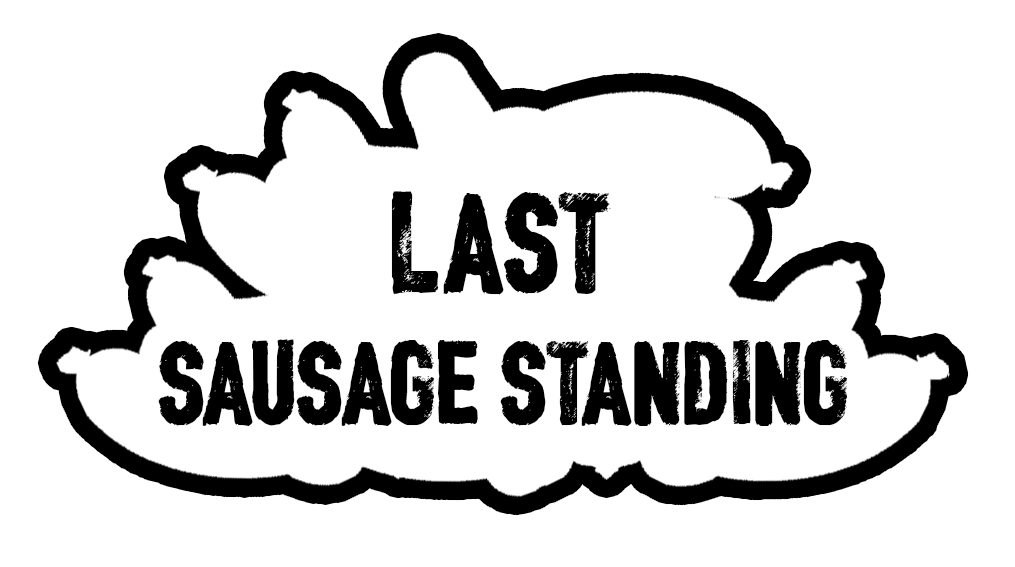
<style>
.page{position:relative;width:1015px;height:567px;background:#ffffff}
.page>*{position:absolute;margin:0}
.t1{font:150px "CFJacquesParizeau-Regular";color:#000000}
.t2{font:125px "CFJacquesParizeau-Regular";color:#000000}
</style>
<div class="page">
<p class="t1" style="left:391px;top:191px;width:220px;height:104px">LAST</p>
<p class="t2" style="left:158px;top:339px;width:689px;height:87px"><span class="t1"><br></span>SAUSAGE STANDING</p>
</div>
